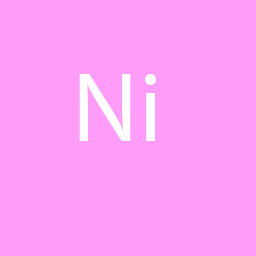
<style>
.page{position:relative;width:256px;height:256px;background:#ff9bf9}
.page>*{position:absolute;margin:0}
.t1{font:100px "MyriadPro-Regular";color:#ffffff}
</style>
<div class="page">
<p class="t1" style="left:79px;top:74px;width:77px;height:67px">Ni</p>
</div>
